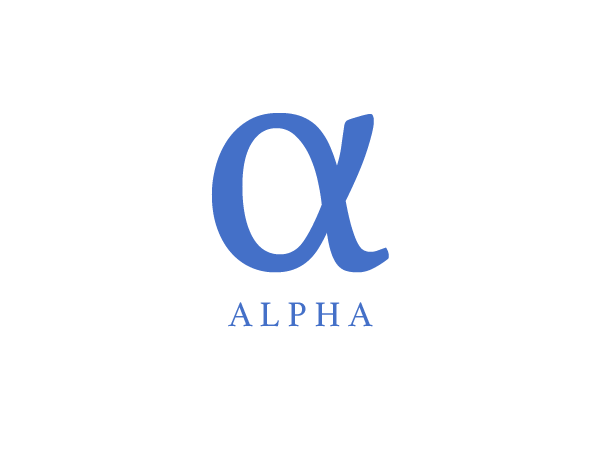
<style>
.page{position:relative;width:600px;height:450px;background:#ffffff}
.page>*{position:absolute;margin:0}
.t1{font:357px "Athelas-Regular";color:#4470c8}
.t2{font:36px "Athelas-Regular";letter-spacing:0.2em;color:#4470c8}
</style>
<div class="page">
<p class="t1" style="left:211px;top:113px;width:178px;height:160px">α</p>
<p class="t2" style="left:228px;top:302px;width:145px;height:25px">ALPHA</p>
</div>
